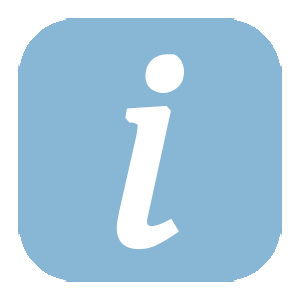
<style>
.page{position:relative;width:300px;height:300px;background:#88b7d5}
.page>*{position:absolute;margin:0}
.t1{font:299.5px "KorinnaNormal-Italic";color:#ffffff;font-weight:bold}
</style>
<div class="page">
<p class="t1" style="left:116px;top:54px;width:69px;height:196px">i</p>
</div>
